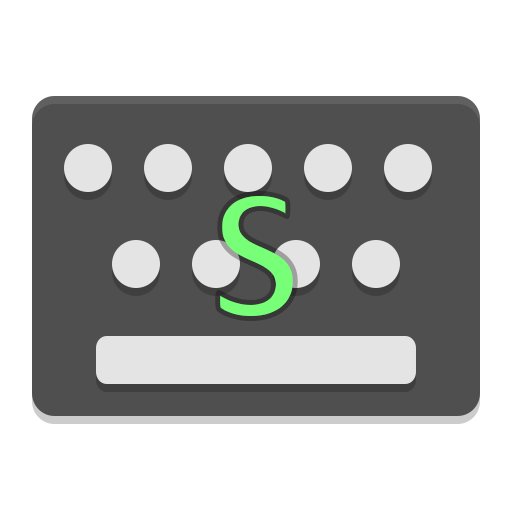
<style>
.page{position:relative;width:512px;height:512px;background:#ffffff}
.page>*{position:absolute;margin:0}
.t1{font:200px "Calibri-Bold"}
</style>
<div class="page">
<p class="t1" style="left:215px;top:191px;width:83px;height:130px">S</p>
</div>
